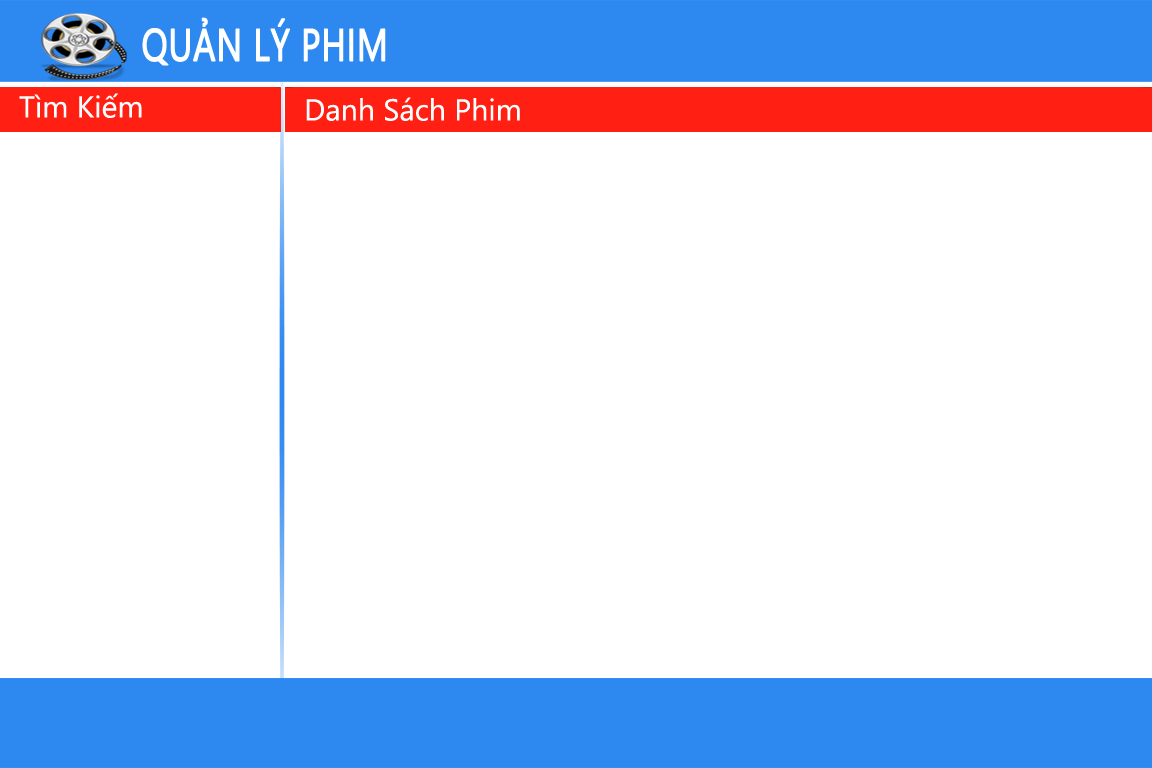
<style>
.page{position:relative;width:1152px;height:768px;background:#ffffff}
.page>*{position:absolute;margin:0}
.t1{font:45px "SegoeUI";color:#ffffff;text-transform:uppercase;font-weight:bold;scale:0.77 1}
.t2{font:30.3px "SegoeUI";color:#ffffff}
</style>
<div class="page">
<p class="t1" style="left:142px;top:17px;width:244px;height:49px">QUẢN LÝ PHIM</p>
<p class="t2" style="left:19px;top:93px;width:123px;height:25px">Tìm Kiếm</p>
<p class="t2" style="left:306px;top:97px;width:214px;height:24px">Danh Sách Phim</p>
</div>
